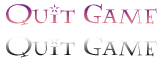
<style>
.page{position:relative;width:160px;height:62px;background:#ffffff}
.page>*{position:absolute;margin:0}
.t1{font:30px "Lumos"}
</style>
<div class="page">
<p class="t1" style="left:6px;top:3px;width:151px;height:23px">Quit Game</p>
<p class="t1" style="left:6px;top:35px;width:151px;height:23px">Quit Game</p>
</div>
